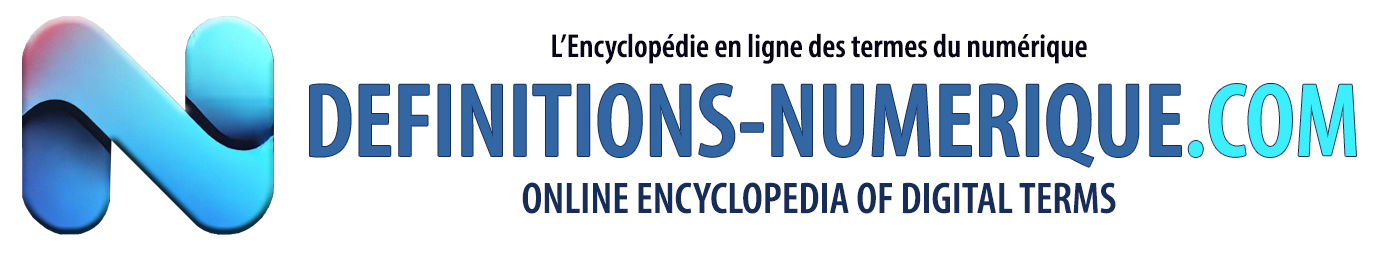
<style>
.page{position:relative;width:1386px;height:253px;background:#ffffff}
.page>*{position:absolute;margin:0}
.t1{font:33.3px "MyriadConceptRoman-SemiboldCondensed";color:#090518}
.t2{font:105.6px "MyriadConceptRoman-SemiboldCondensed";color:#3367a3}
.t3{font:105.6px "MyriadConceptRoman-SemiboldCondensed";color:#3ceffe}
.t4{font:44.4px "MyriadConceptRoman-SemiboldCondensed";color:#172d59}
</style>
<div class="page">
<p class="t1" style="left:552px;top:33px;width:535px;height:32px">L’Encyclopédie en ligne des termes du numérique</p>
<p class="t2" style="left:310px;top:84px;width:1046px;height:83px">DEFINITIONS-NUMERIQUE<span class="t3">.COM</span></p>
<p class="t4" style="left:522px;top:182px;width:594px;height:32px">ONLINE ENCYCLOPEDIA OF DIGITAL TERMS</p>
</div>
